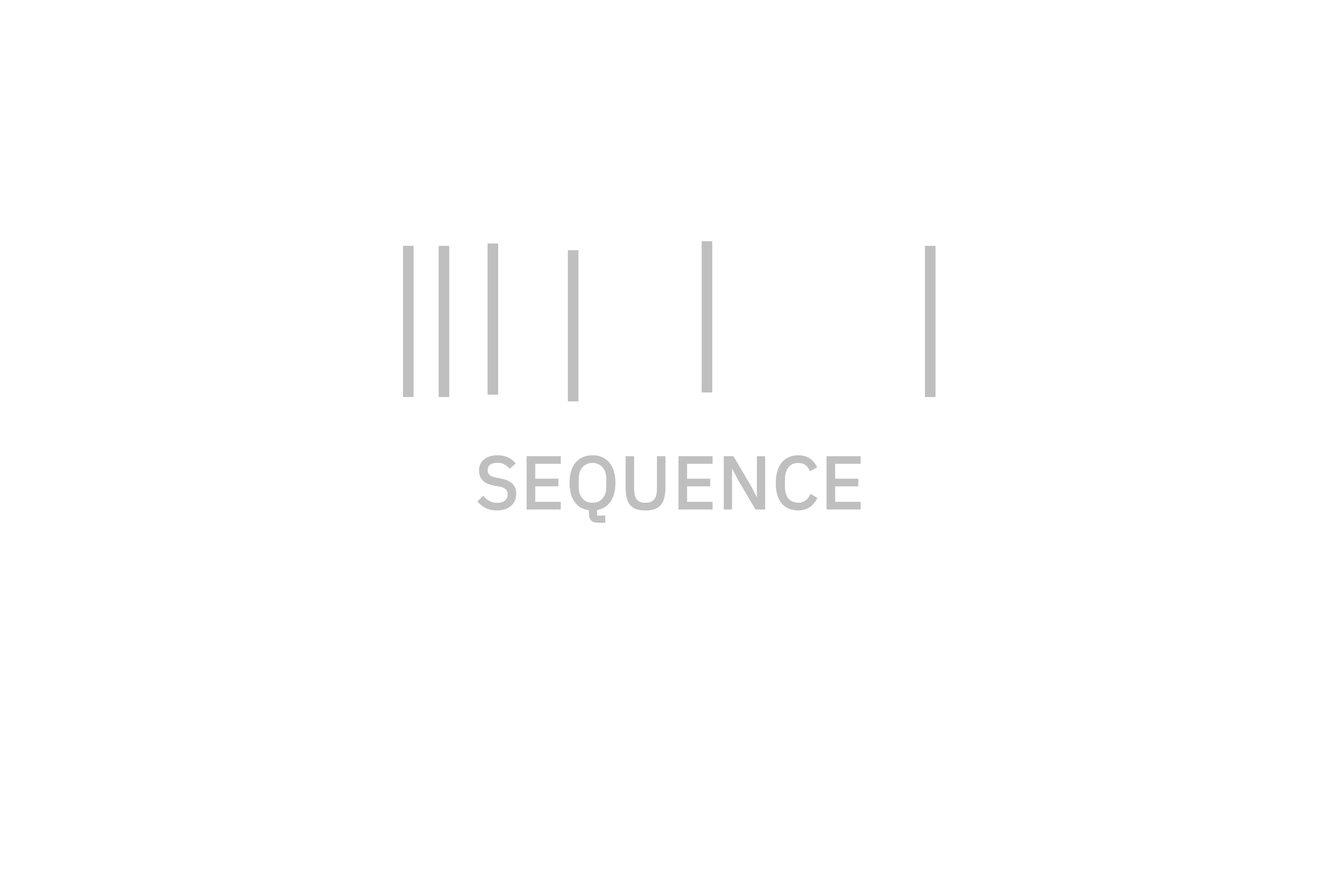
<style>
.page{position:relative;width:1337px;height:892px;background:#ffffff}
.page>*{position:absolute;margin:0}
.t1{font:76.4px "IBMPlexSans-Medium";color:#bfbfbf}
</style>
<div class="page">
<p class="t1" style="left:478px;top:455px;width:383px;height:67px">SEQUENCE</p>
</div>
